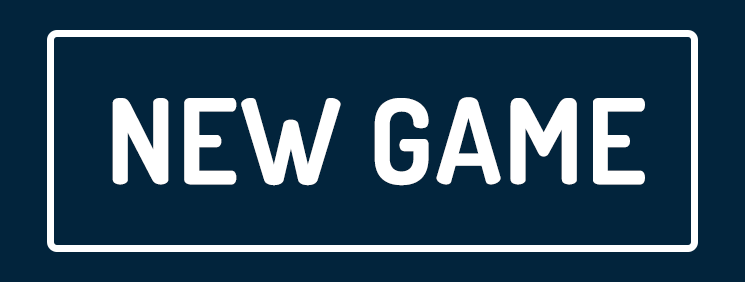
<style>
.page{position:relative;width:745px;height:282px;background:#02243c}
.page>*{position:absolute;margin:0}
.t1{font:117.9px "Dosis-Bold";letter-spacing:0.02em;color:#ffffff;text-transform:uppercase}
</style>
<div class="page">
<p class="t1" style="left:112px;top:97px;width:533px;height:89px">NEW game</p>
</div>
